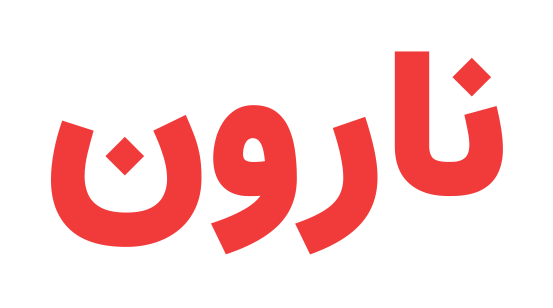
<style>
.page{position:relative;width:553px;height:308px;background:#ffffff}
.page>*{position:absolute;margin:0}
.t1{font:200px "EstedadVF-ExtraBold";color:#f13b3b}
</style>
<div class="page">
<p class="t1" style="left:50px;top:51px;width:453px;height:204px">نارون</p>
</div>
